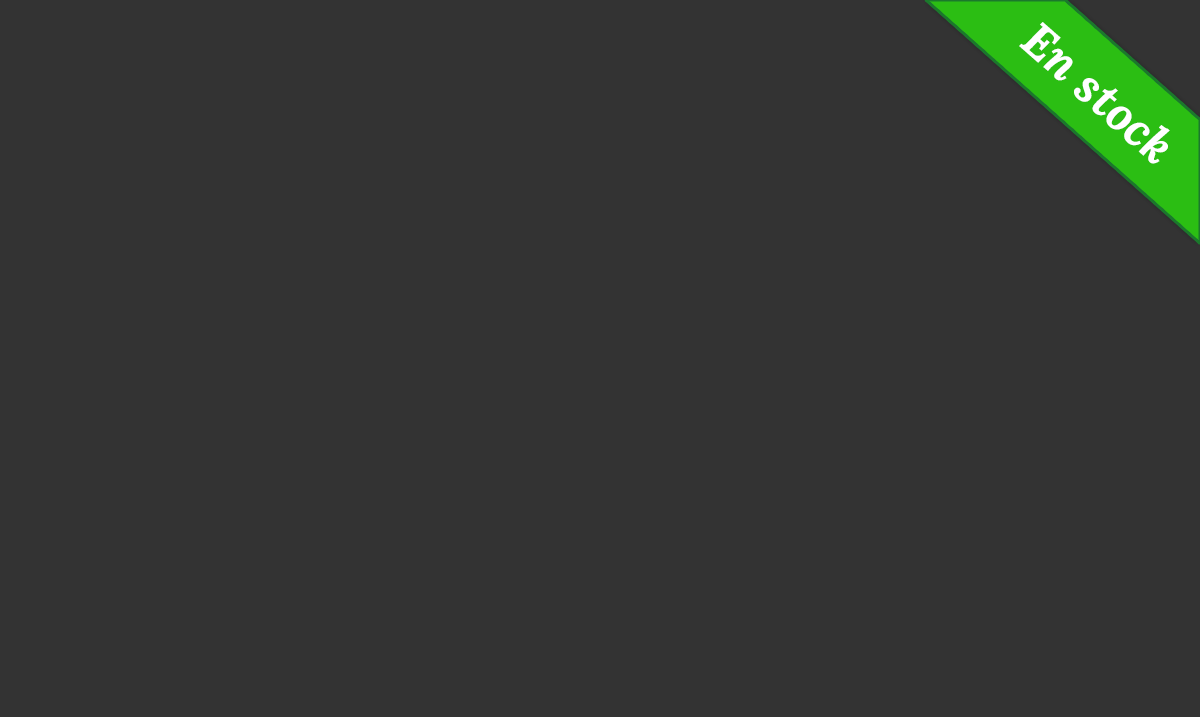
<style>
.page{position:relative;width:1200px;height:717px;background:#333333}
.page>*{position:absolute;margin:0}
.t1{font:48px "Lora-BoldItalic";color:#ffffff}
</style>
<div class="page">
<p class="t1" style="left:1019px;top:22px;width:151px;height:142px;rotate:41deg">En stock</p>
</div>
